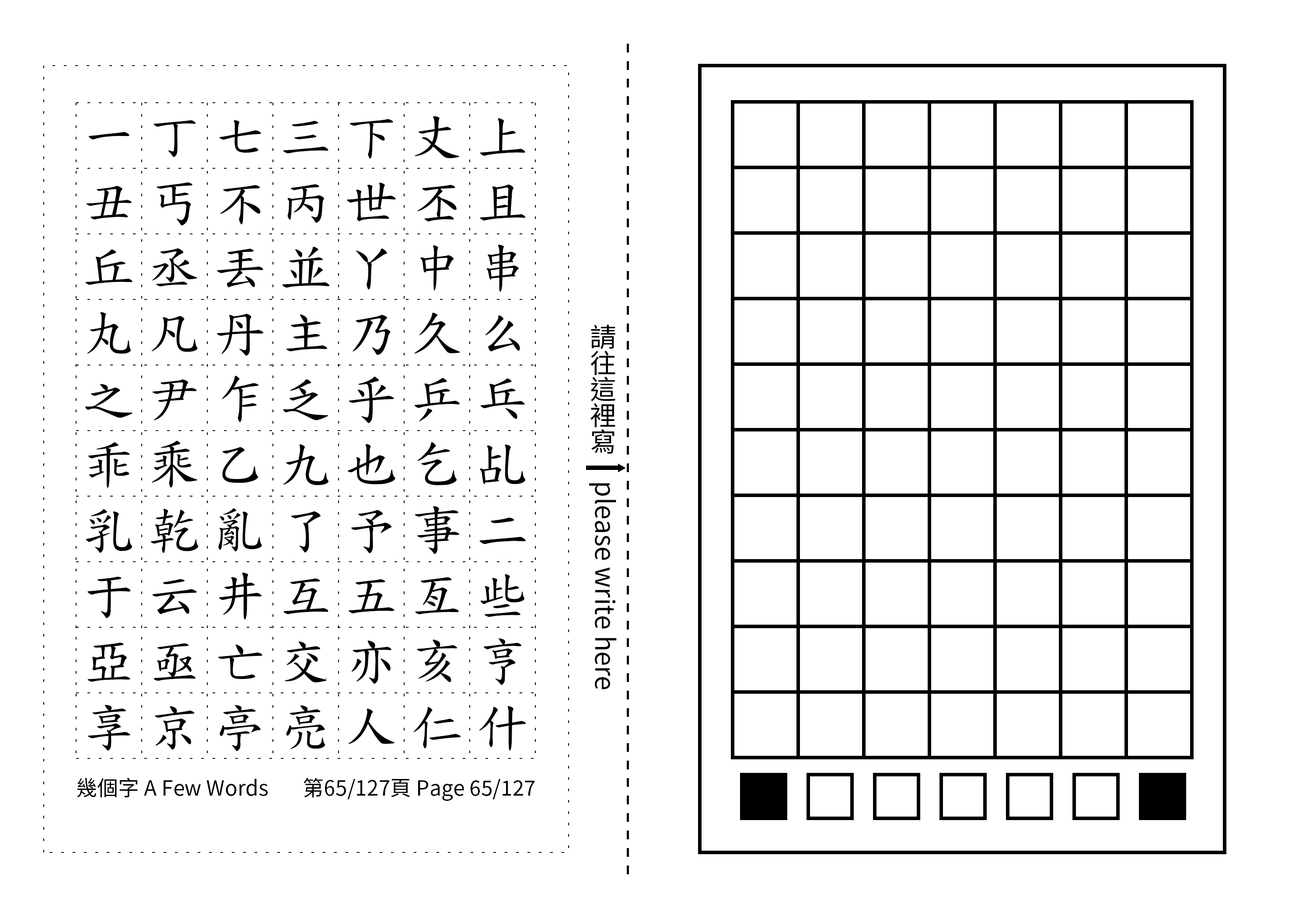
<style>
.page{position:relative;width:1299px;height:918px;background:#ffffff}
.page>*{position:absolute;margin:0}
.t1{font:52.5px/65.6px "TW-Kai-98_1";letter-spacing:0.25em;color:#000000}
.t2{font:26.2px "SourceHanSansTC-Regular";color:#000000}
.t3{font:21px "SourceHanSansTC-Regular";color:#000000}
</style>
<div class="page">
<p class="t1" style="left:85px;top:116px;width:441px;height:636px;text-align:center">一丁七三下丈上丑丐不丙世丕且丘丞丟並丫中串丸凡丹主乃久么之尹乍乏乎乒乓乖乘乙九也乞乩乳乾亂了予事二于云井互五亙些亞亟亡交亦亥亨享京亭亮人仁什</p>
<p class="t2" style="left:589px;top:324px;width:28px;height:366px;text-align:center">請往這裡寫　please write here</p>
<p class="t3" style="left:77px;top:778px;width:191px;height:20px">幾個字 A Few Words</p>
<p class="t3" style="left:303px;top:778px;width:232px;height:23px">第65/127頁 Page 65/127</p>
</div>
